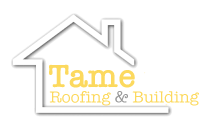
<style>
.page{position:relative;width:211px;height:129px;background:#ffffff}
.page>*{position:absolute;margin:0}
.t1{font:33px "AmericanTypewriter-Semibold";color:#fcd95e}
.t2{font:16.5px "AmericanTypewriter";color:#fcd95e}
.t3{font:16.5px "AmericanTypewriter";color:#9a9a9a}
</style>
<div class="page">
<p class="t1" style="left:49px;top:64px;width:86px;height:24px">Tame</p>
<p class="t2" style="left:49px;top:91px;width:150px;height:15px">Roofing <span class="t3">&amp;</span> Building</p>
</div>
